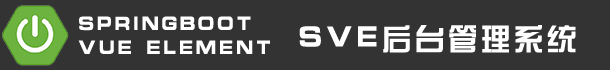
<style>
.page{position:relative;width:610px;height:70px;background:#333333}
.page>*{position:absolute;margin:0}
.t1{font:20px "ç»å¸ç»¼èºä½ç®-regular";letter-spacing:0.1em;color:#ffffff;text-transform:uppercase}
.t2{font:30px "ç»å¸ç»¼èºä½ç®-regular";letter-spacing:0.1em;color:#ffffff;text-transform:uppercase}
</style>
<div class="page">
<p class="t1" style="left:78px;top:16px;width:192px;height:38px">SPRINGBOOT<br>VUE ELEMENT</p>
<p class="t2" style="left:299px;top:25px;width:277px;height:28px">SVE后台管理系统</p>
</div>
